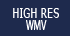
<style>
.page{position:relative;width:70px;height:36px;background:#1e2a4d}
.page>*{position:absolute;margin:0}
.t1{font:24px/12px "Verdana";color:#ffffff;scale:0.67 1}
.t2{font:24px/12px "MyriadPro-Regular";color:#ffffff;scale:0.67 1}
</style>
<div class="page">
<p class="t1" style="left:13px;top:8px;width:46px;height:22px;text-align:center">HIGH RES<br><span class="t2">WMV</span></p>
</div>
